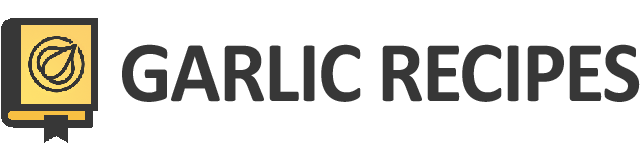
<style>
.page{position:relative;width:640px;height:160px;background:#ffffff}
.page>*{position:absolute;margin:0}
.t1{font:87.5px "Calibri-Bold";letter-spacing:-0.025em;color:#373737;scale:0.96 1}
</style>
<div class="page">
<p class="t1" style="left:122px;top:44px;width:518px;height:58px">GARLIC RECIPES</p>
</div>
